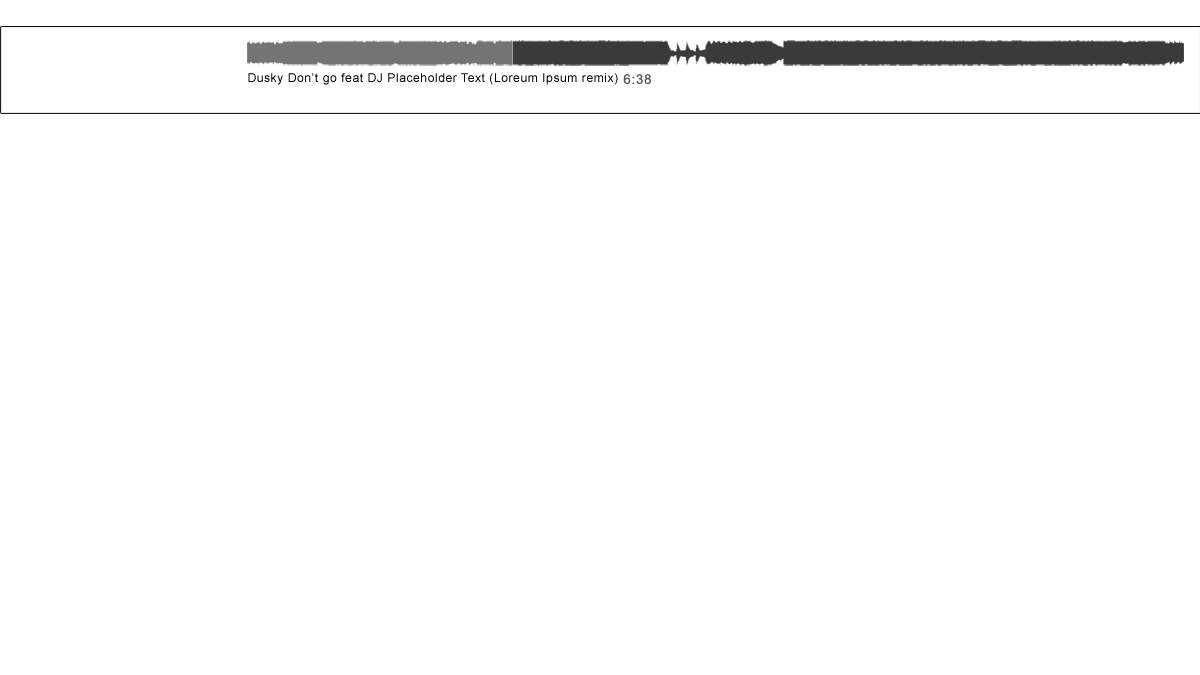
<style>
.page{position:relative;width:1200px;height:675px;background:#ffffff}
.page>*{position:absolute;margin:0}
.t1{font:12px "ArialMT";letter-spacing:0.05em;color:#000000}
.t2{font:13.5px "ArialMT";letter-spacing:0.05em;color:#565656;text-transform:uppercase}
</style>
<div class="page">
<p class="t1" style="left:248px;top:73px;width:370px;height:12px">Dusky Don’t go feat DJ Placeholder Text (Loreum Ipsum remix)</p>
<p class="t2" style="left:623px;top:74px;width:28px;height:11px">6:38</p>
</div>
